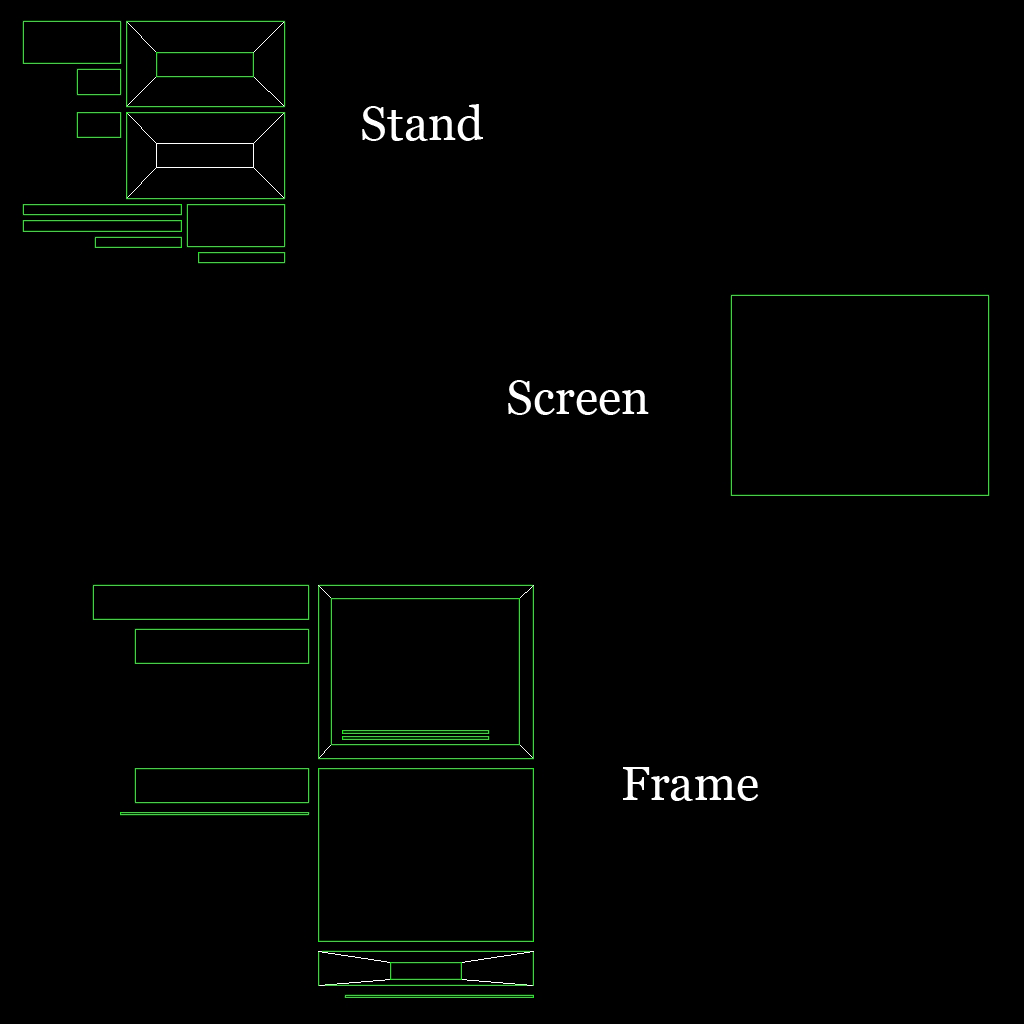
<style>
.page{position:relative;width:1024px;height:1024px;background:#000000}
.page>*{position:absolute;margin:0}
.t1{font:48px "Georgia";color:#ffffff}
</style>
<div class="page">
<p class="t1" style="left:362px;top:104px;width:121px;height:37px">Stand</p>
<p class="t1" style="left:508px;top:380px;width:141px;height:35px">Screen</p>
<p class="t1" style="left:623px;top:767px;width:136px;height:34px">Frame</p>
</div>
